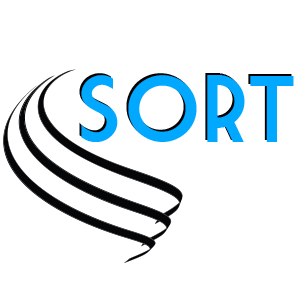
<style>
.page{position:relative;width:300px;height:300px;background:#ffffff}
.page>*{position:absolute;margin:0}
.t1{font:92.3px "MarketDeco";color:#00a8ff}
</style>
<div class="page">
<p class="t1" style="left:79px;top:73px;width:213px;height:67px">sort</p>
<p class="t1" style="left:81px;top:75px;width:213px;height:67px">sort</p>
</div>
